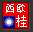
<style>
.page{position:relative;width:33px;height:32px;background:#f20000}
.page>*{position:absolute;margin:0}
.t1{font:10.4px "SimSun";color:#ffffff}
.t2{font:11.7px "SimSun";color:#ffffff}
</style>
<div class="page">
<p class="t1" style="left:6px;top:4px;width:19px;height:9px">西欧</p>
<p class="t2" style="left:16px;top:15px;width:11px;height:12px">桂</p>
</div>
